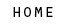
<style>
.page{position:relative;width:67px;height:24px;background:#ffffff}
.page>*{position:absolute;margin:0}
.t1{font:18px "OratorStd";color:#000000}
</style>
<div class="page">
<p class="t1" style="left:13px;top:7px;width:40px;height:10px">home</p>
</div>
